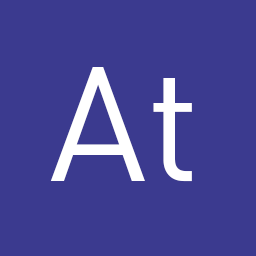
<style>
.page{position:relative;width:256px;height:256px;background:#3b3a8f}
.page>*{position:absolute;margin:0}
.t1{font:160px "DINPro-Regular";color:#ffffff}
</style>
<div class="page">
<p class="t1" style="left:50px;top:67px;width:142px;height:115px">At</p>
</div>
